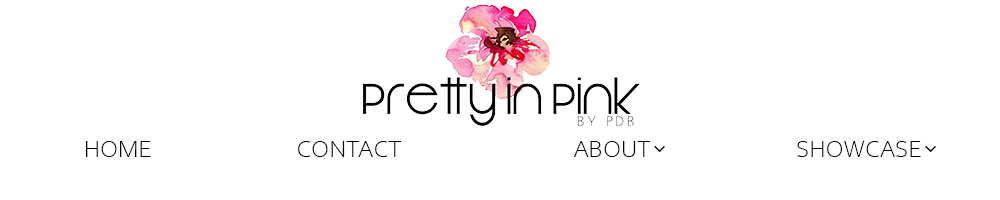
<style>
.page{position:relative;width:1000px;height:200px;background:#ffffff}
.page>*{position:absolute;margin:0}
.t1{font:25px "CorbelLight";color:#010101}
</style>
<div class="page">
<p class="t1" style="left:86px;top:141px;width:65px;height:16px">HOME</p>
<p class="t1" style="left:298px;top:141px;width:104px;height:16px">CONTACT</p>
<p class="t1" style="left:574px;top:141px;width:77px;height:16px">ABOUT</p>
<p class="t1" style="left:797px;top:141px;width:124px;height:16px">SHOWCASE</p>
</div>
